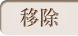
<style>
.page{position:relative;width:78px;height:36px;background:#ebe3dd}
.page>*{position:absolute;margin:0}
.t1{font:20px "RyuminPr6N-Bold"}
</style>
<div class="page">
<p class="t1" style="left:20px;top:7px;width:39px;height:20px">移除</p>
</div>
